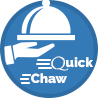
<style>
.page{position:relative;width:100px;height:100px;background:#ffffff}
.page>*{position:absolute;margin:0}
.t1{font:13.2px "Raleway-Black";color:#fcfcfb}
.t2{font:13.2px "Papyrus-Regular";color:#fcfcfb;font-weight:bold}
</style>
<div class="page">
<p class="t1" style="left:31px;top:56px;width:63px;height:28px"><span class="t2">  Q</span>uick<br> Chaw</p>
</div>
